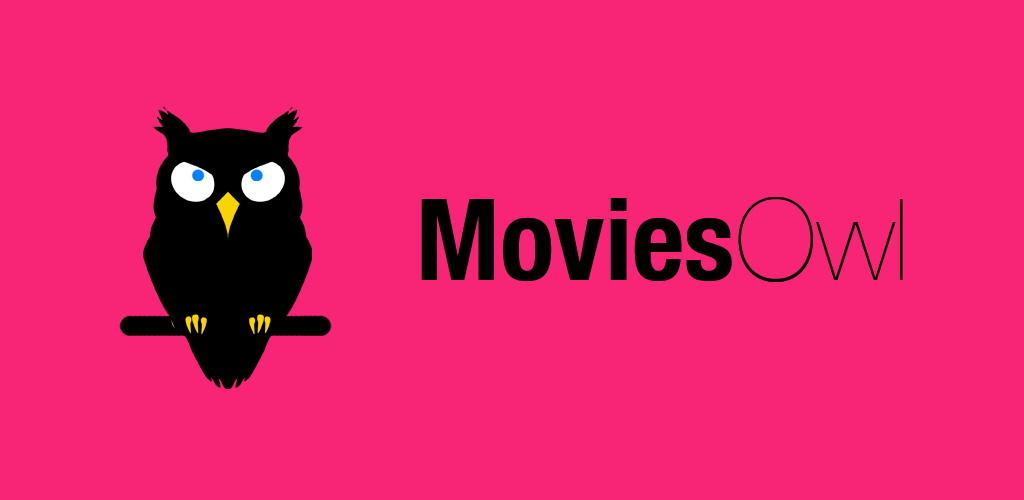
<style>
.page{position:relative;width:1024px;height:500px;background:#f82476}
.page>*{position:absolute;margin:0}
.t1{font:113.4px "HelveticaNeue-CondensedBold";color:#000000}
.t2{font:113.4px "HelveticaNeue-UltraLight";color:#000000}
</style>
<div class="page">
<p class="t1" style="left:421px;top:197px;width:482px;height:85px">Movies<span class="t2">Owl</span></p>
</div>
